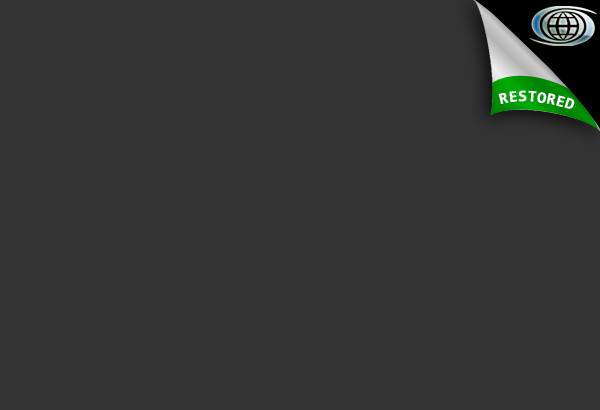
<style>
.page{position:relative;width:600px;height:410px;background:#333333}
.page>*{position:absolute;margin:0}
.t1{font:16px "Consolas-Bold";color:#ffffff;font-weight:bold}
</style>
<div class="page">
<p class="t1" style="left:498px;top:90px;width:77px;height:19px">RESTORED</p>
</div>
